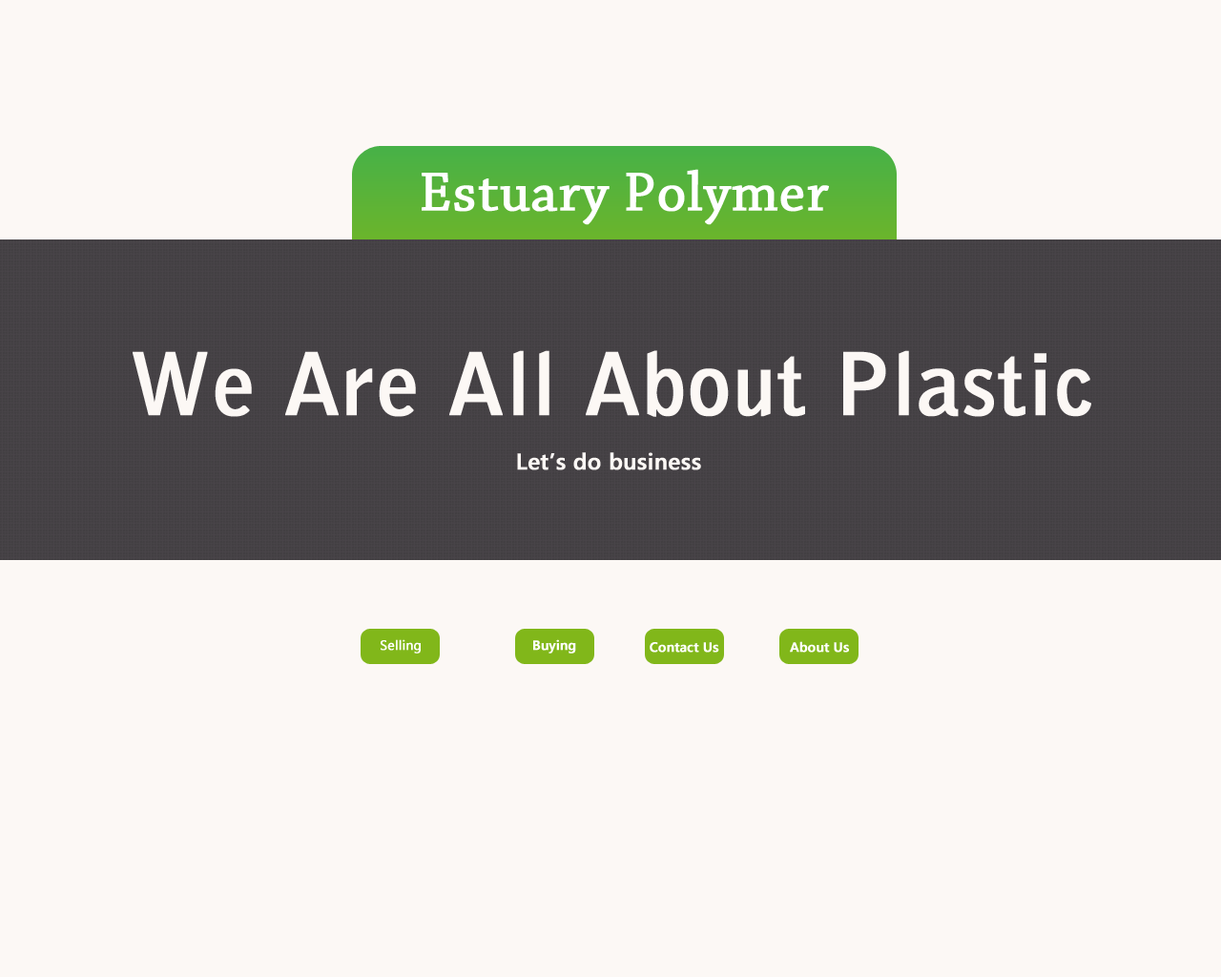
<style>
.page{position:relative;width:1221px;height:977px;background:#fcf8f5}
.page>*{position:absolute;margin:0}
.t1{font:57.2px "ChaparralPro-Regular";color:#ffffff;font-weight:bold}
.t2{font:84.9px "BellGothicStd-Bold";color:#fcf8f5;font-weight:bold}
.t3{font:22.9px "SegoeUI-SemiBold";color:#fcf8f5;font-weight:bold}
.t4{font:13.4px "SegoeUI";color:#ffffff;font-weight:bold}
.t5{font:13.4px "SegoeUI-SemiBold";color:#ffffff;font-weight:bold}
</style>
<div class="page">
<p class="t1" style="left:422px;top:169px;width:407px;height:56px">Estuary Polymer</p>
<p class="t2" style="left:133px;top:350px;width:958px;height:67px">We Are All About Plastic</p>
<p class="t3" style="left:517px;top:452px;width:184px;height:18px">Let’s do business</p>
<p class="t4" style="left:381px;top:639px;width:40px;height:14px">Selling</p>
<p class="t5" style="left:533px;top:639px;width:43px;height:14px">Buying</p>
<p class="t5" style="left:650px;top:642px;width:69px;height:10px">Contact Us</p>
<p class="t5" style="left:790px;top:641px;width:59px;height:11px">About Us</p>
</div>
